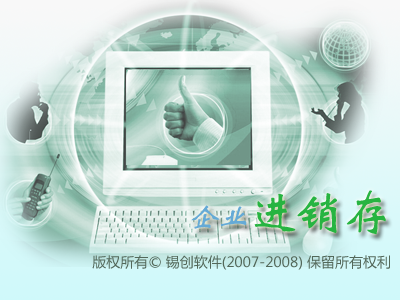
<style>
.page{position:relative;width:400px;height:300px}
.page>*{position:absolute;margin:0}
.t1{font:48px "STXinwei";color:#27b441}
.t2{font:30px "STXinwei";color:#65aad6;font-style:italic}
.t3{font:14px "MicrosoftYaHei";color:#53685a}
.t4{font:14px "MicrosoftYaHei";color:#1b2617}
</style>
<div class="page">
<p class="t1" style="left:191px;top:190px;width:195px;height:45px"><span class="t2">企业</span>进销存</p>
<p class="t3" style="left:92px;top:255px;width:298px;height:15px"><span class="t4"> </span>版权所有© 锡创软件(2007-2008) 保留所有权利</p>
</div>
